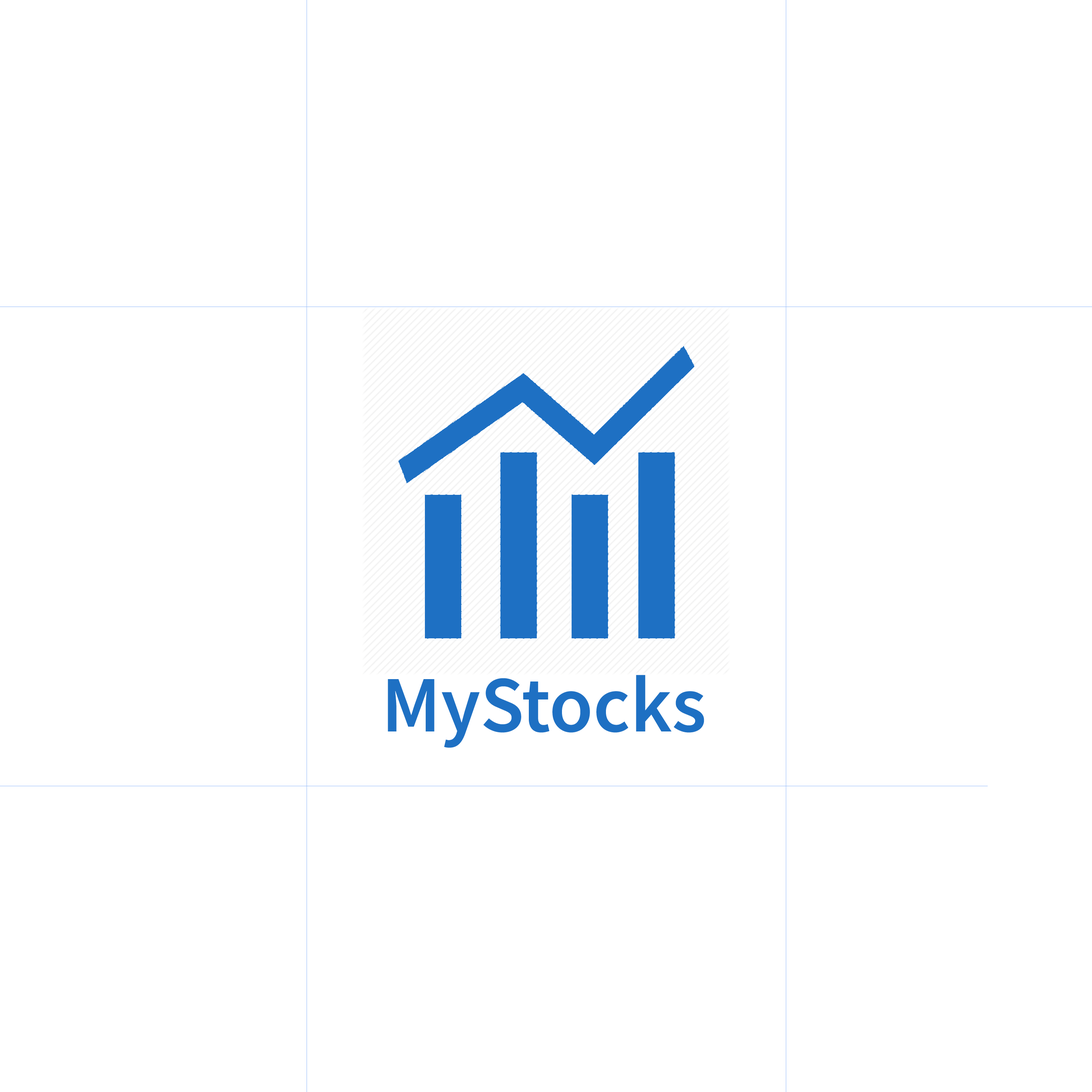
<style>
.page{position:relative;width:1092px;height:1092px;background:#ffffff}
.page>*{position:absolute;margin:0}
.t1{font:79.9px "SourceSansPro-Semibold";color:#1e70c3}
</style>
<div class="page">
<p class="t1" style="left:388px;top:675px;width:316px;height:73px">MyStocks</p>
</div>
